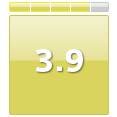
<style>
.page{position:relative;width:117px;height:117px;background:#dad35d}
.page>*{position:absolute;margin:0}
.t1{font:36px "Colaborate-Bold";color:#ffffff;text-transform:uppercase}
</style>
<div class="page">
<p class="t1" style="left:35px;top:49px;width:48px;height:23px">3.9</p>
</div>
